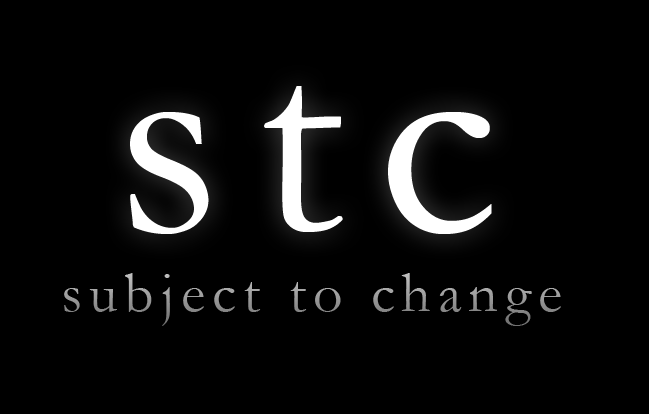
<style>
.page{position:relative;width:649px;height:414px;background:#000000}
.page>*{position:absolute;margin:0}
.t1{font:293.2px "Garamond";letter-spacing:0.12em;color:#ffffff}
.t2{font:58px "Garamond";letter-spacing:0.12em;color:#989898}
</style>
<div class="page">
<p class="t1" style="left:130px;top:86px;width:362px;height:148px">stc</p>
<p class="t2" style="left:64px;top:273px;width:497px;height:53px">subject to change</p>
</div>
